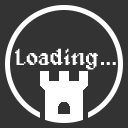
<style>
.page{position:relative;width:128px;height:128px;background:#333333}
.page>*{position:absolute;margin:0}
.t1{font:23.7px "Alagard";color:#ffffff}
</style>
<div class="page">
<p class="t1" style="left:15px;top:48px;width:101px;height:22px">Loading...</p>
</div>
